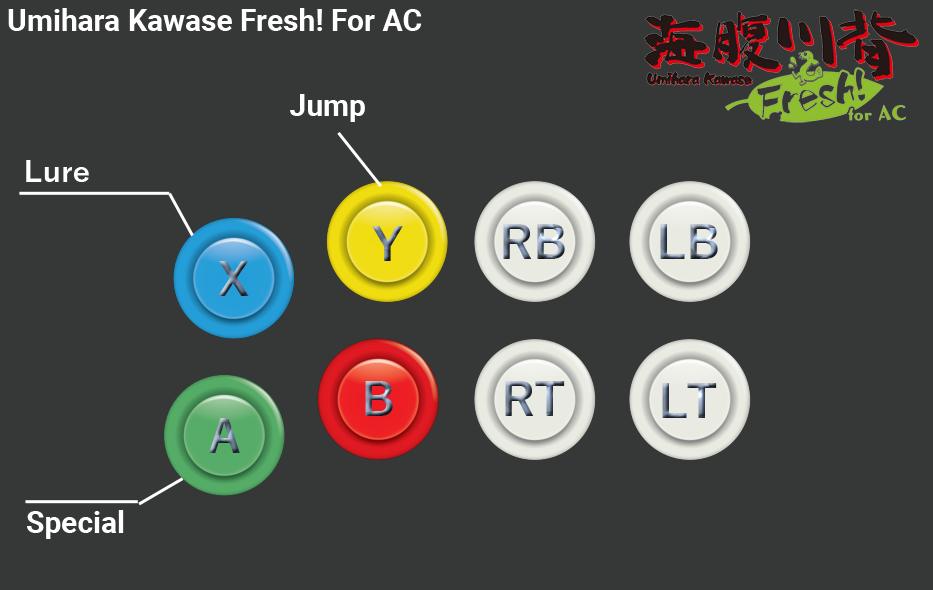
<style>
.page{position:relative;width:933px;height:590px;background:#363838}
.page>*{position:absolute;margin:0}
.t1{font:30px "Roboto-Bold";color:#ffffff}
.t2{font:30px "YuGothic-Bold";color:#ffffff}
</style>
<div class="page">
<p class="t1" style="left:8px;top:8px;width:414px;height:23px">Umihara Kawase Fresh! For AC</p>
<p class="t1" style="left:290px;top:94px;width:75px;height:28px">Jump</p>
<p class="t2" style="left:26px;top:160px;width:63px;height:22px">Lure</p>
<p class="t1" style="left:27px;top:510px;width:97px;height:29px">Special</p>
</div>
